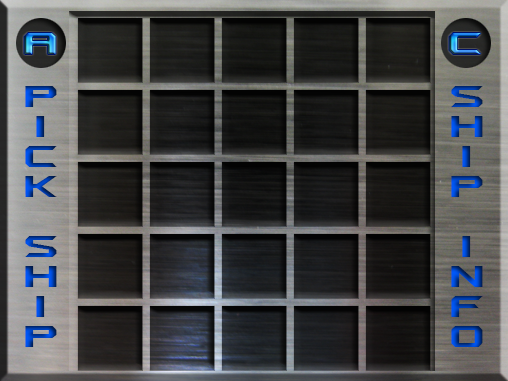
<style>
.page{position:relative;width:508px;height:381px}
.page>*{position:absolute;margin:0}
.t1{font:35px "AeromaticsSmallCapsNC";scale:1.1 1}
.t2{font:35px "AeromaticsNC";scale:1.1 1}
.t3{font:35px/30px "AeromaticsNC";scale:1.1 1}
</style>
<div class="page">
<p class="t1" style="left:24px;top:33px;width:32px;height:21px">A</p>
<p class="t2" style="left:449px;top:33px;width:32px;height:21px">C</p>
<p class="t3" style="left:25px;top:86px;width:32px;height:261px;text-align:center">p<br>i<br>c<br>k<br><br>s<br>h<br>i<br>p</p>
<p class="t3" style="left:451px;top:86px;width:32px;height:261px;text-align:center">s<br>h<br>i<br>p<br><br>i<br>n<br>f<br>o</p>
</div>
